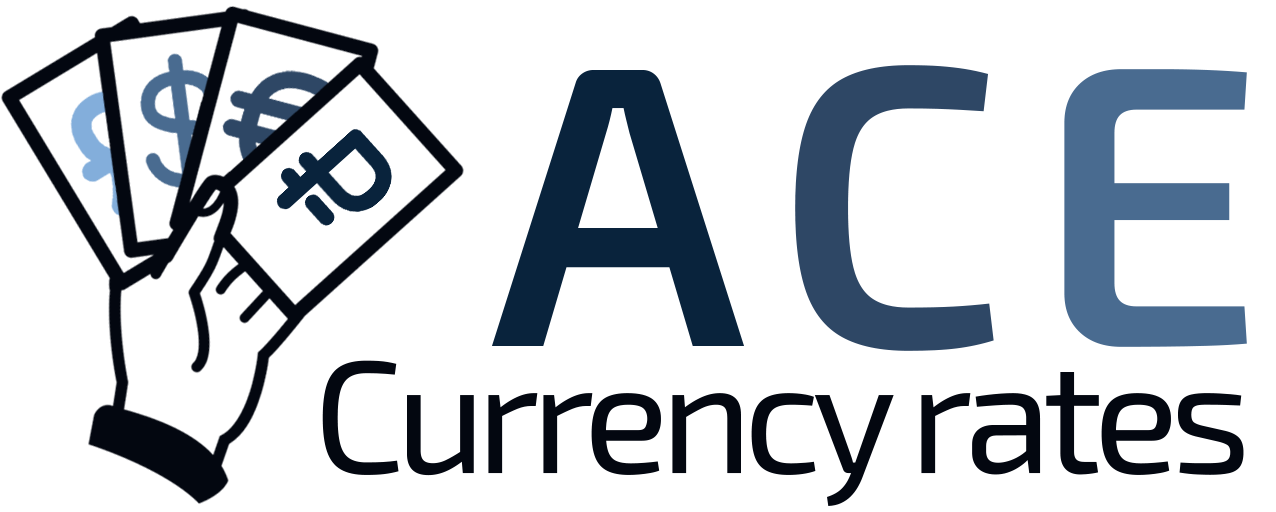
<style>
.page{position:relative;width:1276px;height:512px;background:#ffffff}
.page>*{position:absolute;margin:0}
.t1{font:400px "Exo2-SemiBold";letter-spacing:0.075em;color:#09233c}
.t2{font:400px "Exo2-SemiBold";letter-spacing:0.075em;color:#2e4765}
.t3{font:400px "Exo2-SemiBold";letter-spacing:0.075em;color:#496b90}
.t4{font:160px "Exo2-Regular";letter-spacing:-0.06em;color:#030710}
</style>
<div class="page">
<p class="t1" style="left:492px;top:65px;width:755px;height:286px">A<span class="t2">C</span><span class="t3">E</span></p>
<p class="t4" style="left:322px;top:360px;width:922px;height:146px">Currency rates</p>
</div>
